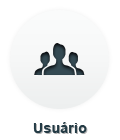
<style>
.page{position:relative;width:120px;height:140px;background:#ffffff}
.page>*{position:absolute;margin:0}
.t1{font:14px "Arial-BoldMT";letter-spacing:0.02em;color:#243b45}
</style>
<div class="page">
<p class="t1" style="left:33px;top:122px;width:54px;height:11px">Usuário</p>
</div>
